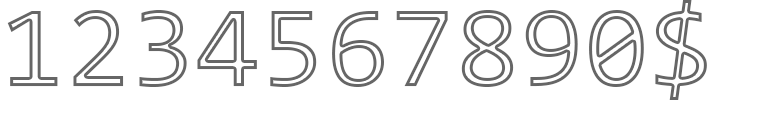
<style>
.page{position:relative;width:771px;height:125px;background:#ffffff}
.page>*{position:absolute;margin:0}
.t1{font:118.1px "Consolas"}
</style>
<div class="page">
<p class="t1" style="left:7px;top:0px;width:700px;height:100px">1234567890$</p>
</div>
